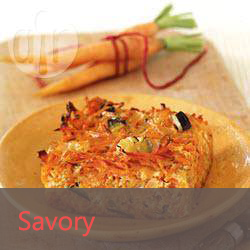
<style>
.page{position:relative;width:250px;height:250px}
.page>*{position:absolute;margin:0}
.t1{font:26.4px "MicrosoftTaiLe";color:#f14e4e}
</style>
<div class="page">
<p class="t1" style="left:19px;top:211px;width:76px;height:26px">Savory</p>
</div>
